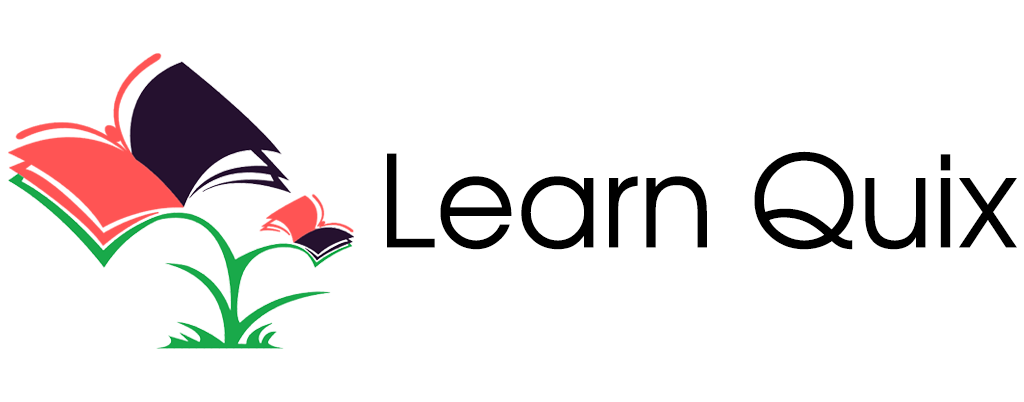
<style>
.page{position:relative;width:1024px;height:402px;background:#ffffff}
.page>*{position:absolute;margin:0}
.t1{font:127px "TeXGyreAdventor-Regular";color:#000000}
</style>
<div class="page">
<p class="t1" style="left:387px;top:151px;width:630px;height:99px">Learn Quix</p>
</div>
